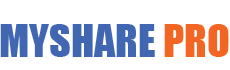
<style>
.page{position:relative;width:230px;height:70px;background:#ffffff}
.page>*{position:absolute;margin:0}
.t1{font:42px "Impact";color:#4267b2}
.t2{font:42px "Impact";color:#f26522}
</style>
<div class="page">
<p class="t1" style="left:0px;top:24px;width:229px;height:33px">MYSHARE<span class="t2"> PRO</span></p>
</div>
